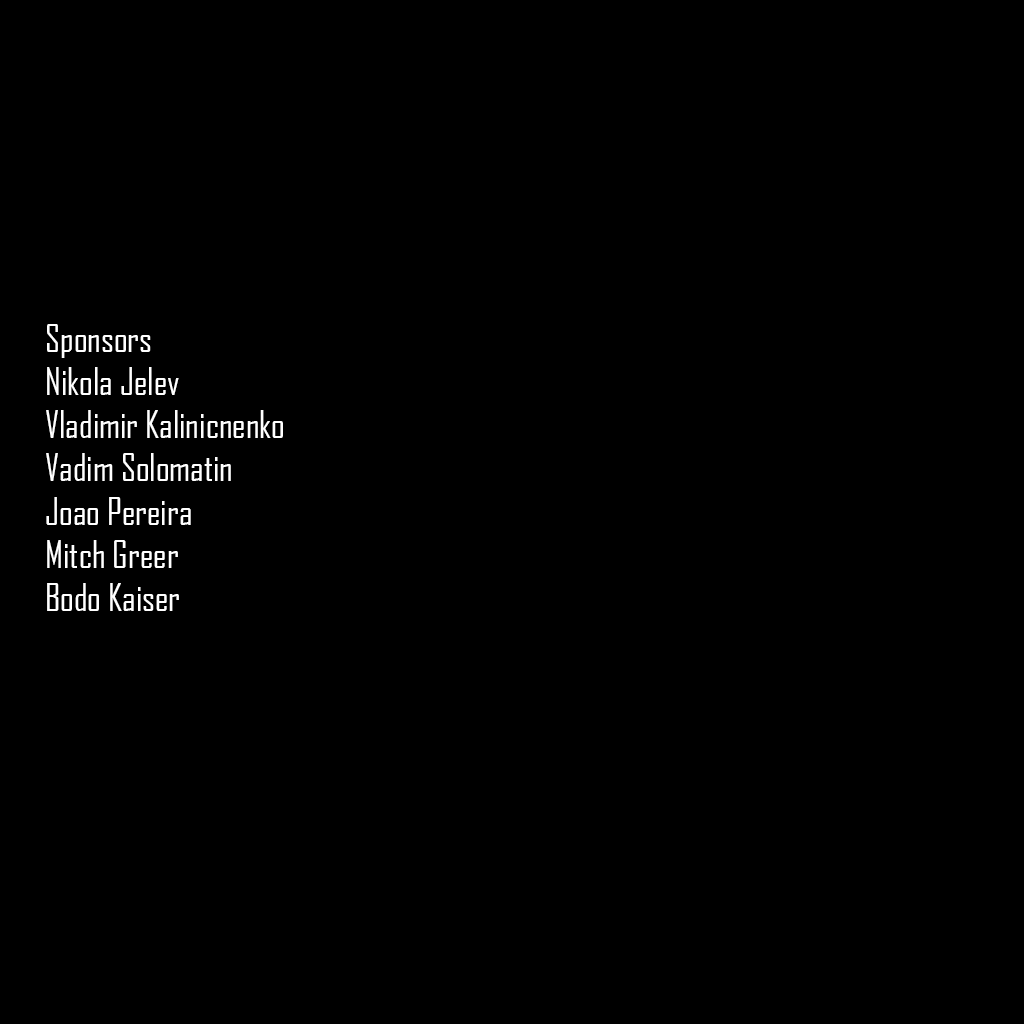
<style>
.page{position:relative;width:1024px;height:1024px;background:#000000}
.page>*{position:absolute;margin:0}
.t1{font:36px "AgencyFBCyrillic";color:#ffffff}
</style>
<div class="page">
<p class="t1" style="left:46px;top:324px;width:237px;height:287px">Sponsors<br>Nikola Jelev<br>Vladimir Kalinicnenko<br>Vadim Solomatin<br>Joao Pereira<br>Mitch Greer<br>Bodo Kaiser</p>
</div>
